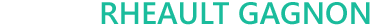
<style>
.page{position:relative;width:374px;height:25px;background:#ffffff}
.page>*{position:absolute;margin:0}
.t1{font:31.1px "SegoeUI-Semibold";color:#1abc9c}
</style>
<div class="page">
<p class="t1" style="left:101px;top:2px;width:269px;height:23px">RHEAULT GAGNON</p>
</div>
